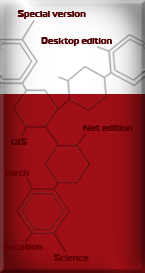
<style>
.page{position:relative;width:145px;height:273px}
.page>*{position:absolute;margin:0}
.t1{font:9px "ft40-Roman";color:#540104}
.t2{font:9px "ft40-Roman";color:#570004}
.t3{font:9px "ft40-Roman";color:#650004}
</style>
<div class="page">
<p class="t1" style="left:17px;top:10px;width:69px;height:9px">Special version</p>
<p class="t1" style="left:41px;top:37px;width:71px;height:9px">Desktop edition</p>
<p class="t2" style="left:83px;top:125px;width:50px;height:6px">Net edition</p>
<p class="t1" style="left:10px;top:138px;width:17px;height:7px">GIS</p>
<p class="t3" style="left:53px;top:254px;width:36px;height:7px">Science</p>
</div>
